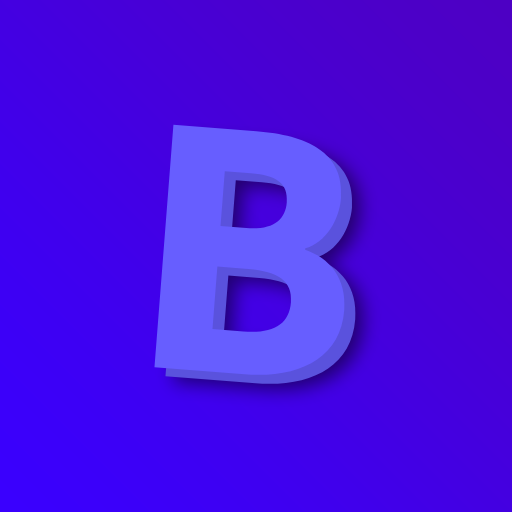
<style>
.page{position:relative;width:512px;height:512px}
.page>*{position:absolute;margin:0}
.t1{font:373.2px "SourceSansPro-Bold";color:#675eff}
</style>
<div class="page">
<p class="t1" style="left:154px;top:124px;width:191px;height:251px;rotate:4deg">B</p>
</div>
